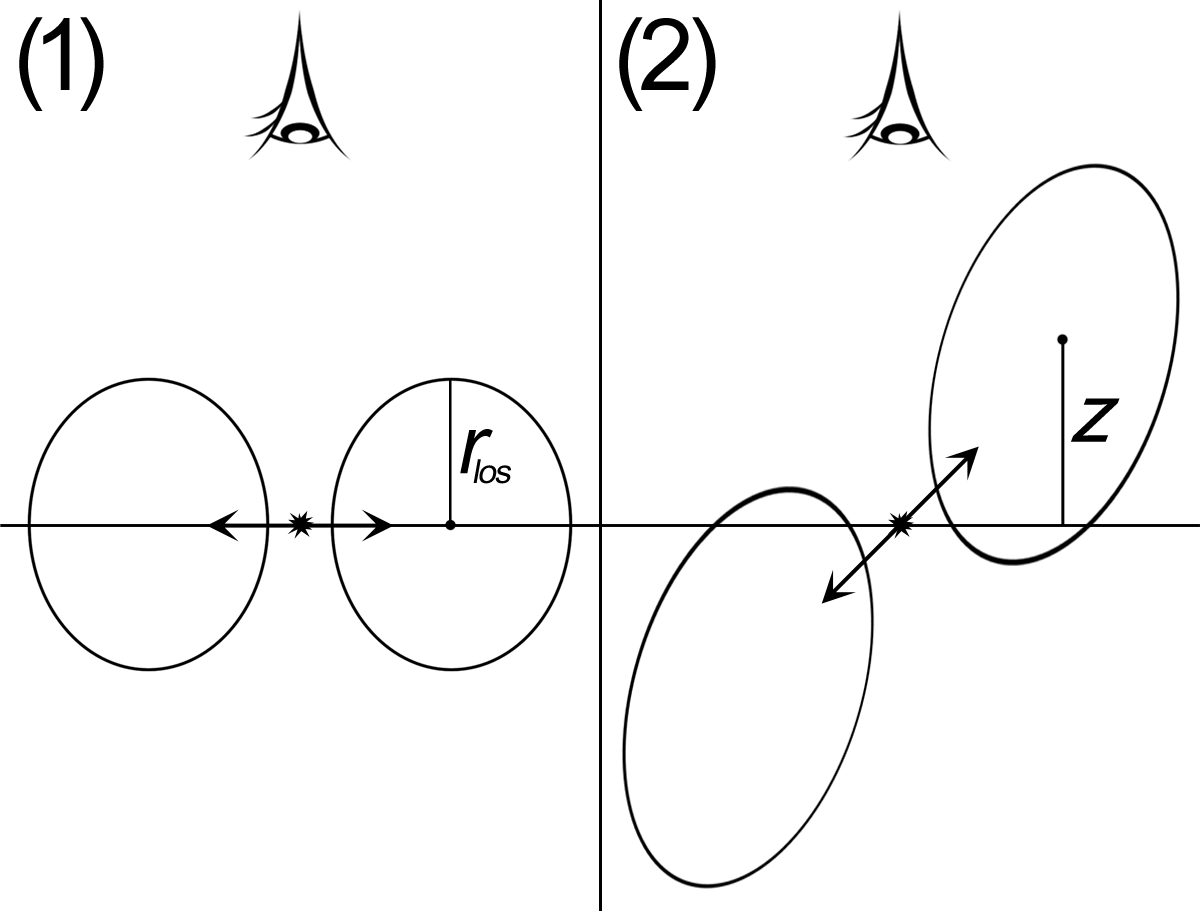
<style>
.page{position:relative;width:1200px;height:911px;background:#ffffff}
.page>*{position:absolute;margin:0}
.t1{font:100px "ArialMT";letter-spacing:-0.14em;color:#000000}
.t2{font:100px "ArialMT";letter-spacing:-0.08em;color:#000000}
.t3{font:83.3px "Arial-ItalicMT";color:#000000;font-style:italic}
.t4{font:83.3px "Arial-ItalicMT";color:#000000}
.t5{font:33.3px "ArialMT";letter-spacing:-0.06em;color:#000000;font-style:italic}
</style>
<div class="page">
<p class="t1" style="left:19px;top:17px;width:85px;height:94px">(1)</p>
<p class="t2" style="left:619px;top:17px;width:97px;height:94px">(2)</p>
<p class="t3" style="left:1071px;top:398px;width:49px;height:44px">z</p>
<p class="t4" style="left:460px;top:429px;width:33px;height:45px">r</p>
<p class="t5" style="left:473px;top:459px;width:38px;height:25px">los</p>
</div>
